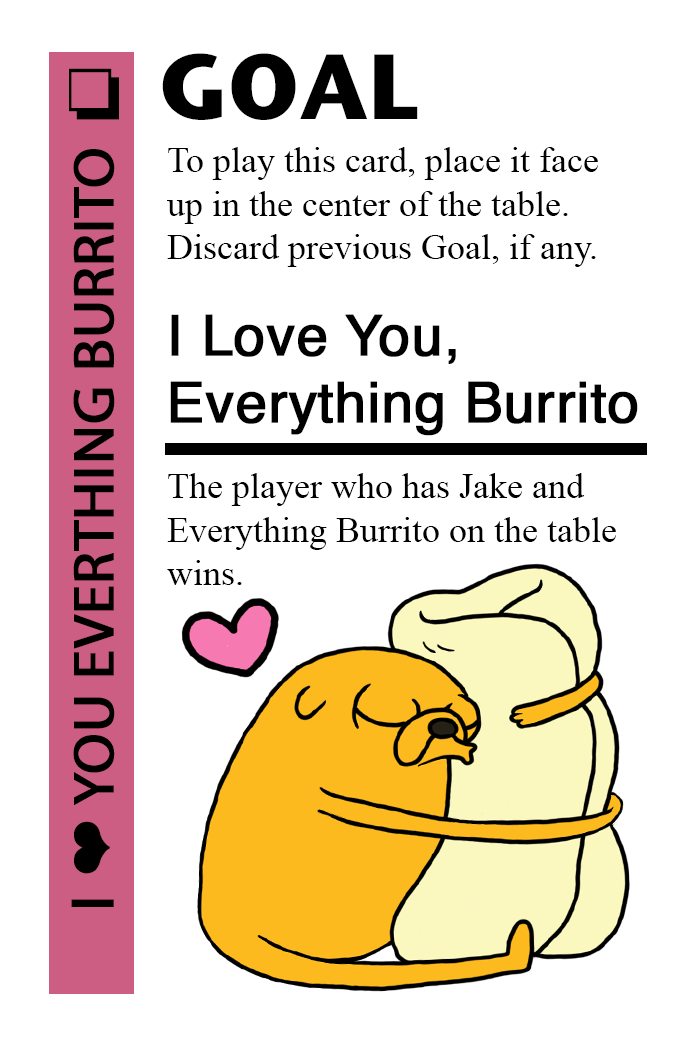
<style>
.page{position:relative;width:700px;height:1042px;background:#ffffff}
.page>*{position:absolute;margin:0}
.t1{font:92px "StoneSansITC-Bold";color:#000000}
.t2{font:72px "MS-Gothic";color:#000000}
.t3{font:58px "MyriadPro-Regular";color:#000000;font-weight:bold}
.t4{font:58px "Helvetica";color:#000000;font-weight:bold}
.t5{font:58px "MS-Gothic";color:#000000;font-weight:bold}
.t6{font:36px "TimesNewRomanPSMT";color:#000000}
.t7{font:56px "Helvetica";color:#000000;font-weight:bold}
</style>
<div class="page">
<p class="t1" style="left:162px;top:53px;width:256px;height:67px">GOAL</p>
<p class="t2" style="left:69px;top:68px;width:50px;height:52px">❏</p>
<p class="t3" style="left:71px;top:149px;width:44px;height:758px;rotate:-90deg"><span class="t4">I </span><span class="t5">❤</span> YOU EVERTHING BURRITO</p>
<p class="t6" style="left:167px;top:147px;width:431px;height:120px">To play this card, place it face<br>up in the center of the table.<br>Discard previous Goal, if any.</p>
<p class="t7" style="left:170px;top:314px;width:468px;height:122px">I Love You,<br>Everything Burrito</p>
<p class="t6" style="left:167px;top:473px;width:449px;height:112px">The player who has Jake and <br>Everything Burrito on the table <br>wins.</p>
</div>
